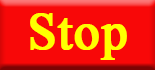
<style>
.page{position:relative;width:155px;height:70px;background:#f80808}
.page>*{position:absolute;margin:0}
.t1{font:76px "Microsoft-Himalaya";color:#ffff00;font-weight:bold}
</style>
<div class="page">
<p class="t1" style="left:30px;top:13px;width:97px;height:47px">Stop</p>
</div>
